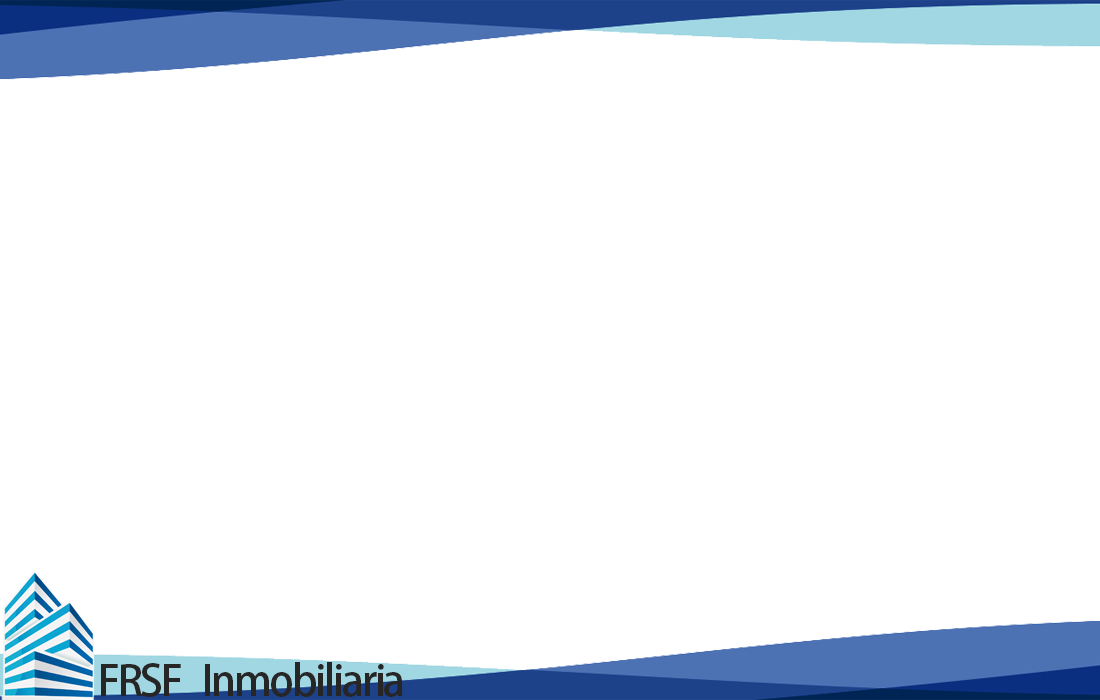
<style>
.page{position:relative;width:1100px;height:700px;background:#ffffff}
.page>*{position:absolute;margin:0}
.t1{font:42.1px "KozGoPr6N-Medium";letter-spacing:-0.056em;color:#272626}
</style>
<div class="page">
<p class="t1" style="left:101px;top:662px;width:302px;height:35px">FRSF   Inmobiliaria</p>
</div>
